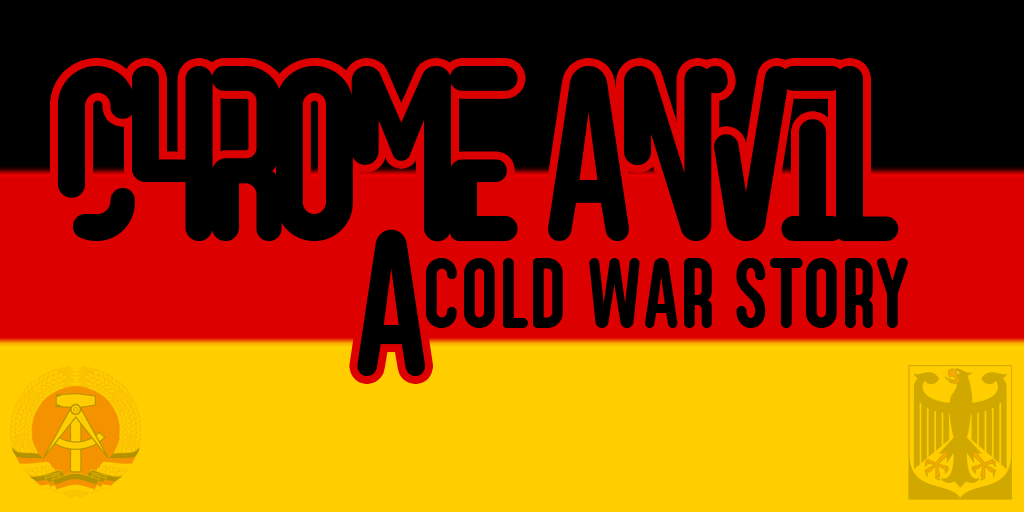
<style>
.page{position:relative;width:1024px;height:512px;background:#000000}
.page>*{position:absolute;margin:0}
.t1{font:250px "Argio-Regular";letter-spacing:-0.1em;color:#000000;text-transform:uppercase}
.t2{font:209px "Argio-Regular";letter-spacing:-0.01em;color:#000000;text-transform:uppercase}
.t3{font:100px "Argio-Regular";letter-spacing:-0.01em;color:#000000}
</style>
<div class="page">
<p class="t1" style="left:58px;top:66px;width:841px;height:176px">chrome anvil</p>
<p class="t2" style="left:357px;top:229px;width:68px;height:147px">A</p>
<p class="t3" style="left:426px;top:258px;width:137px;height:70px">cold</p>
<p class="t3" style="left:589px;top:258px;width:123px;height:70px">war</p>
<p class="t3" style="left:736px;top:258px;width:172px;height:70px">story</p>
</div>
